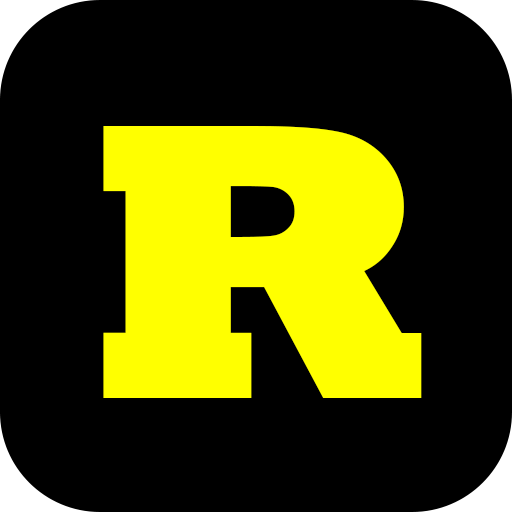
<style>
.page{position:relative;width:512px;height:512px;background:#000000}
.page>*{position:absolute;margin:0}
.t1{font:400px "Rockwell-ExtraBold";color:#ffff00}
</style>
<div class="page">
<p class="t1" style="left:103px;top:126px;width:319px;height:272px">R</p>
</div>
